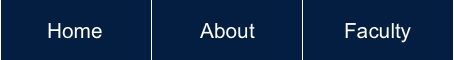
<style>
.page{position:relative;width:454px;height:60px;background:#041e42}
.page>*{position:absolute;margin:0}
.t1{font:20.8px "ArialMT";color:#ffffff}
</style>
<div class="page">
<p class="t1" style="left:48px;top:23px;width:54px;height:16px">Home</p>
<p class="t1" style="left:200px;top:23px;width:55px;height:16px">About</p>
<p class="t1" style="left:345px;top:23px;width:66px;height:20px">Faculty</p>
</div>
